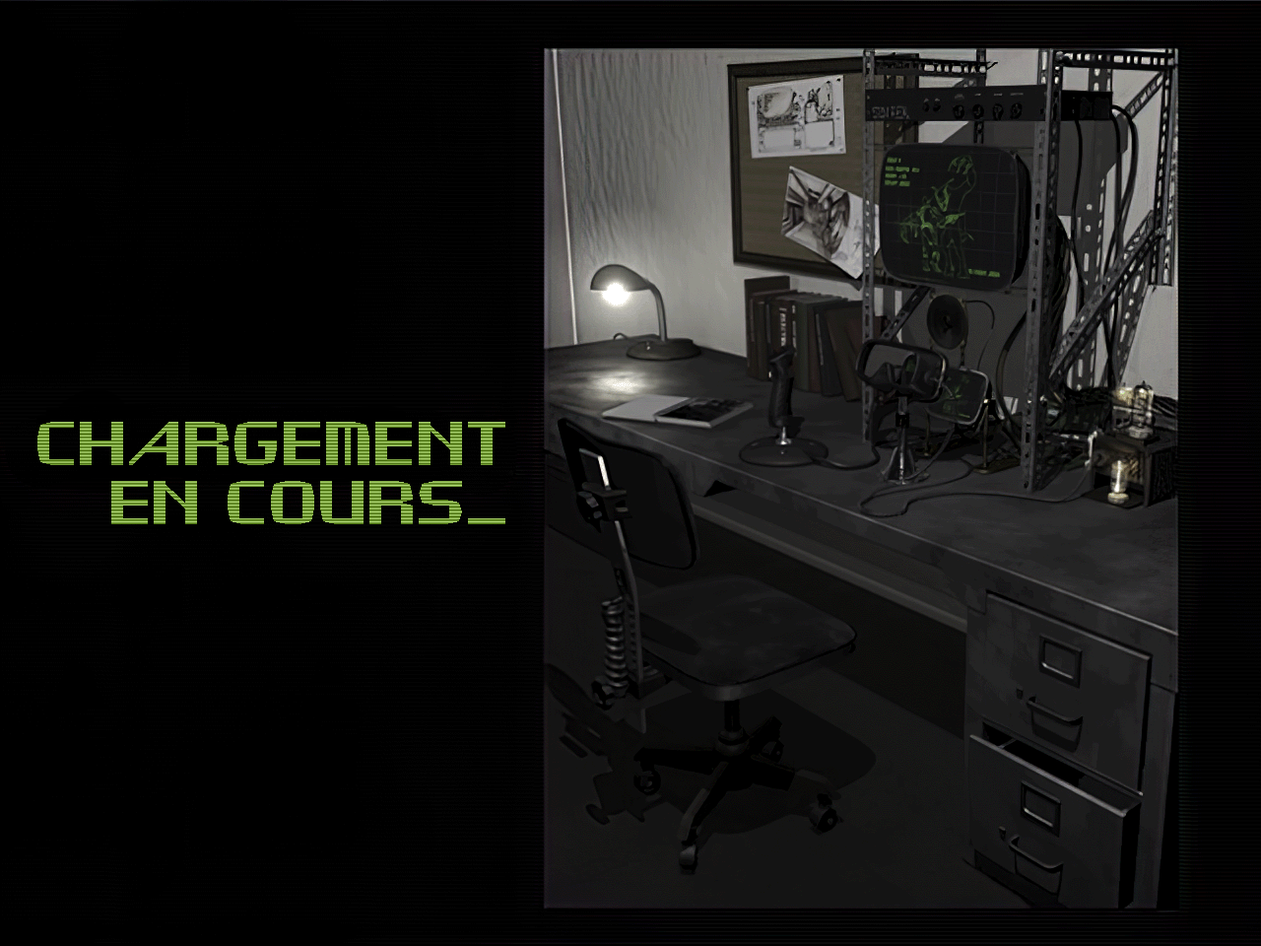
<style>
.page{position:relative;width:1261px;height:946px;background:#000000}
.page>*{position:absolute;margin:0}
.t1{font:49.3px "JHFallout"}
</style>
<div class="page">
<p class="t1" style="left:37px;top:422px;width:468px;height:102px;text-align:right">CHARGEMENT<br>EN COURS_</p>
</div>
